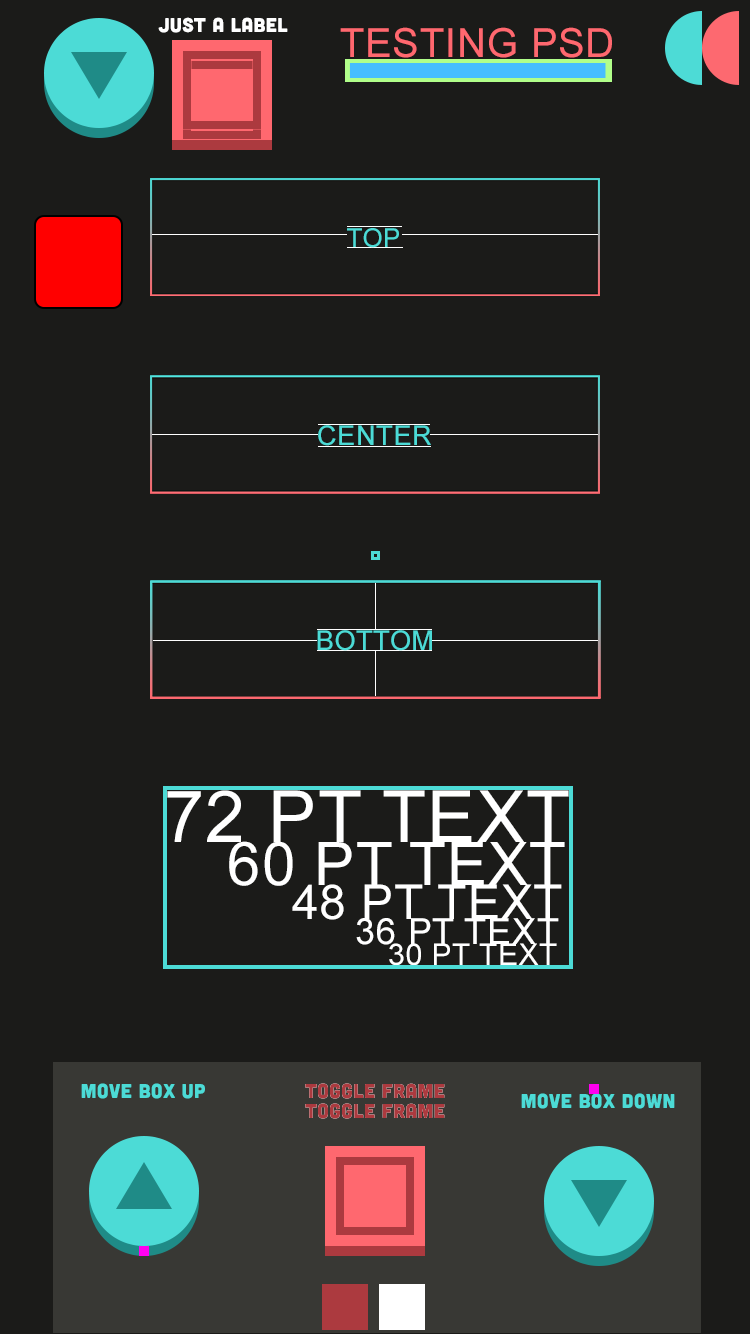
<style>
.page{position:relative;width:750px;height:1334px;background:#1b1b19}
.page>*{position:absolute;margin:0}
.t1{font:20px "Cubano-Regular";letter-spacing:0.02em;color:#ffffff}
.t2{font:40px "ArialMT";letter-spacing:0.02em;color:#ff686f}
.t3{font:26px "ArialMT";letter-spacing:0.02em;color:#4cdbd6}
.t4{font:27.2px "ArialMT";letter-spacing:0.02em;color:#4cdbd6}
.t5{font:72px "ArialMT";letter-spacing:0.02em;color:#ffffff}
.t6{font:60px "ArialMT";letter-spacing:0.02em;color:#ffffff}
.t7{font:48px "ArialMT";letter-spacing:0.02em;color:#ffffff}
.t8{font:36px "ArialMT";letter-spacing:0.02em;color:#ffffff}
.t9{font:30px "ArialMT";letter-spacing:0.02em;color:#ffffff}
.t10{font:20px "Cubano-Regular";letter-spacing:0.02em;color:#4cdbd6}
.t11{font:20px "Cubano-Regular";letter-spacing:0.02em;color:#ac3a3f}
</style>
<div class="page">
<p class="t1" style="left:158px;top:17px;width:130px;height:16px">JUST A LABEL</p>
<p class="t2" style="left:340px;top:27px;width:272px;height:31px">TESTING PSD</p>
<p class="t3" style="left:347px;top:228px;width:52px;height:20px">TOP</p>
<p class="t4" style="left:318px;top:425px;width:113px;height:21px">CENTER</p>
<p class="t4" style="left:317px;top:630px;width:115px;height:21px">BOTTOM</p>
<p class="t5" style="left:167px;top:790px;width:402px;height:52px">72 PT TEXT</p>
<p class="t6" style="left:229px;top:841px;width:336px;height:45px">60 PT TEXT</p>
<p class="t7" style="left:292px;top:884px;width:270px;height:36px">48 PT TEXT</p>
<p class="t8" style="left:356px;top:918px;width:203px;height:27px">36 PT TEXT</p>
<p class="t9" style="left:389px;top:943px;width:168px;height:23px">30 PT TEXT</p>
<p class="t10" style="left:81px;top:1083px;width:124px;height:16px">MOVE BOX UP</p>
<p class="t11" style="left:305px;top:1083px;width:140px;height:16px">TOGGLE FRAME</p>
<p class="t11" style="left:305px;top:1083px;width:140px;height:16px">TOGGLE FRAME</p>
<p class="t10" style="left:521px;top:1093px;width:154px;height:16px">MOVE BOX DOWN</p>
<p class="t11" style="left:305px;top:1103px;width:140px;height:16px">TOGGLE FRAME</p>
<p class="t11" style="left:305px;top:1103px;width:140px;height:16px">TOGGLE FRAME</p>
</div>
